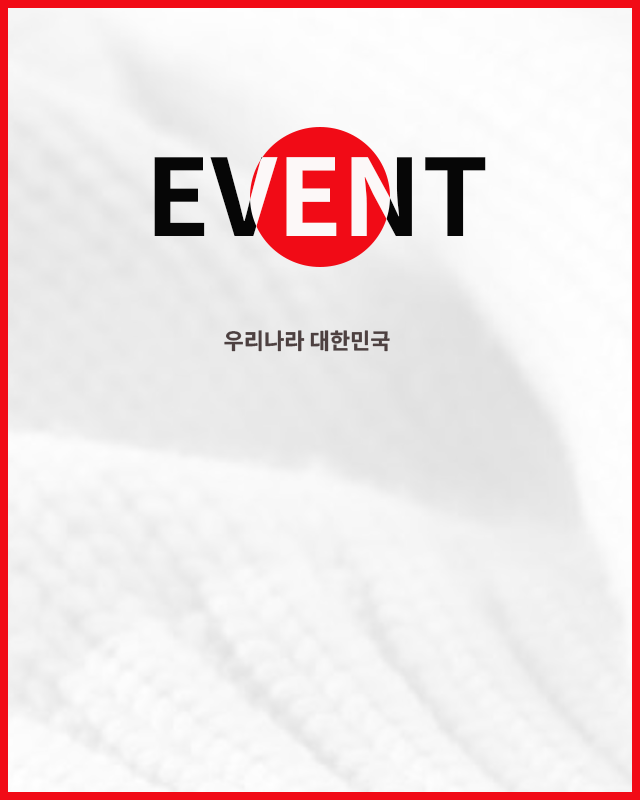
<style>
.page{position:relative;width:640px;height:800px}
.page>*{position:absolute;margin:0}
.t1{font:106.4px "NotoSansKR-Bold";text-transform:uppercase}
.t2{font:22px "NotoSansKR-Bold";color:#4d4040;text-transform:uppercase}
</style>
<div class="page">
<p class="t1" style="left:154px;top:157px;width:332px;height:79px">event</p>
<p class="t1" style="left:154px;top:157px;width:332px;height:79px">event</p>
<p class="t2" style="left:224px;top:330px;width:166px;height:22px">우리나라 대한민국</p>
</div>
